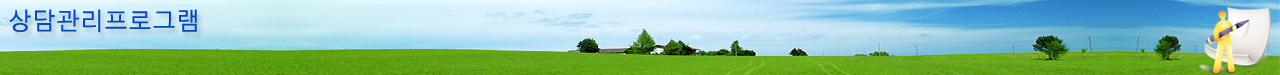
<style>
.page{position:relative;width:1280px;height:75px}
.page>*{position:absolute;margin:0}
.t1{font:24px "MalgunGothicRegular";color:#0249c1}
</style>
<div class="page">
<p class="t1" style="left:9px;top:9px;width:188px;height:24px">상담관리프로그램</p>
</div>
